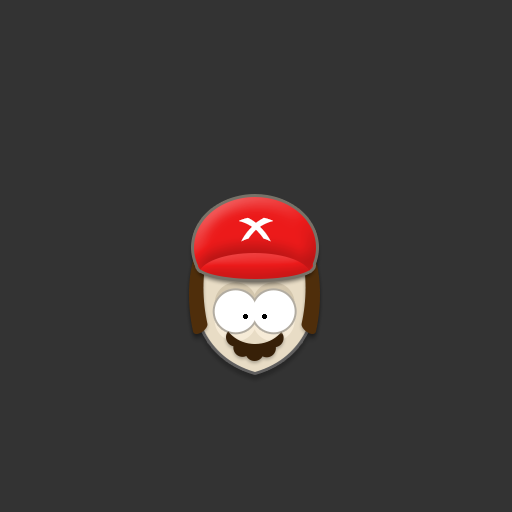
<style>
.page{position:relative;width:512px;height:512px;background:#333333}
.page>*{position:absolute;margin:0}
.t1{font:30px "Arial-BoldMT";color:#ffffff}
</style>
<div class="page">
<p class="t1" style="left:239px;top:217px;width:34px;height:25px">X</p>
</div>
